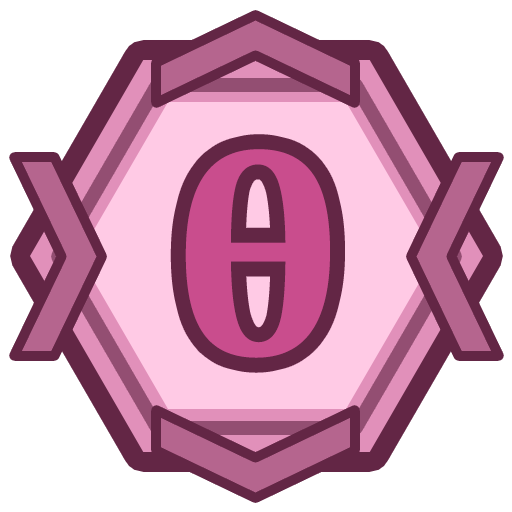
<style>
.page{position:relative;width:512px;height:512px;background:#ffffff}
.page>*{position:absolute;margin:0}
.t1{font:300px "Cambria-Bold";color:#c94d8d}
</style>
<div class="page">
<p class="t1" style="left:185px;top:149px;width:145px;height:209px">θ</p>
</div>
